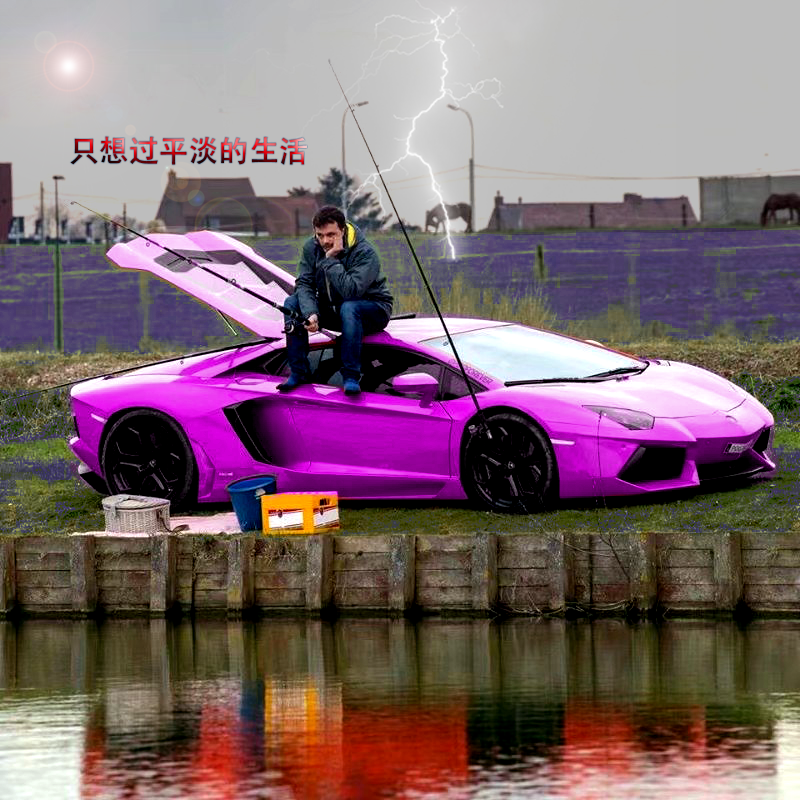
<style>
.page{position:relative;width:800px;height:800px}
.page>*{position:absolute;margin:0}
.t1{font:30px "AdobeHeitiStd-Regular";text-transform:uppercase}
</style>
<div class="page">
<p class="t1" style="left:70px;top:136px;width:237px;height:29px">只想过平淡的生活</p>
</div>
